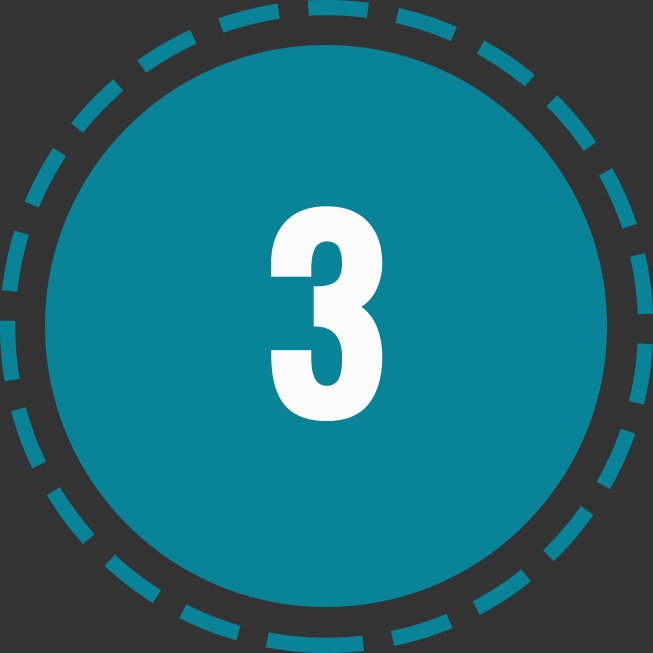
<style>
.page{position:relative;width:653px;height:653px;background:#098398}
.page>*{position:absolute;margin:0}
.t1{font:234.9px "Oswald-Bold";color:#fcfbfb}
</style>
<div class="page">
<p class="t1" style="left:271px;top:206px;width:112px;height:216px">3</p>
</div>
